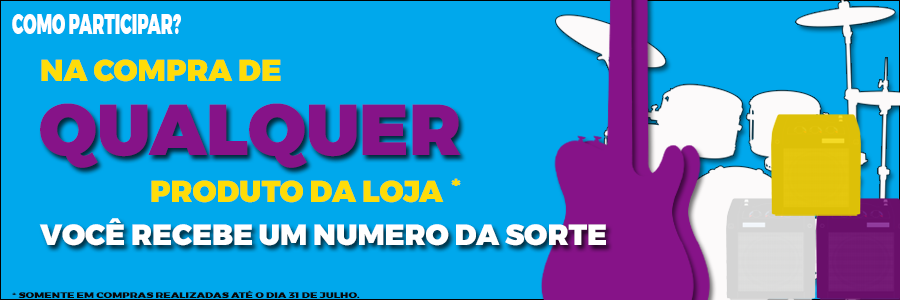
<style>
.page{position:relative;width:900px;height:300px;background:#00a8ec}
.page>*{position:absolute;margin:0}
.t1{font:29.2px "Montserrat-Black";color:#ffffff;scale:0.57 1}
.t2{font:30px "Montserrat-Black";color:#fedc09}
.t3{font:72px "Montserrat-Black";color:#861388}
.t4{font:22.4px "Montserrat-Black";color:#fedc09;scale:1.1 1}
.t5{font:29px "Montserrat-Black";color:#ffffff}
.t6{font:8px "Montserrat-Black";color:#080808;scale:1.35 1}
</style>
<div class="page">
<p class="t1" style="left:12px;top:14px;width:169px;height:20px">COMO PARTICIPAR?</p>
<p class="t2" style="left:41px;top:59px;width:240px;height:23px">NA COMPRA DE</p>
<p class="t3" style="left:40px;top:103px;width:421px;height:65px">QUALQUER</p>
<p class="t2" style="left:151px;top:180px;width:293px;height:23px">PRODUTO DA LOJA</p>
<p class="t4" style="left:451px;top:178px;width:10px;height:8px">*</p>
<p class="t5" style="left:39px;top:218px;width:567px;height:28px">VOCÊ RECEBE UM NUMERO DA SORTE</p>
<p class="t6" style="left:12px;top:290px;width:348px;height:9px">* SOMENTE EM COMPRAS REALIZADAS ATÉ O DIA 31 DE JULHO.</p>
</div>
